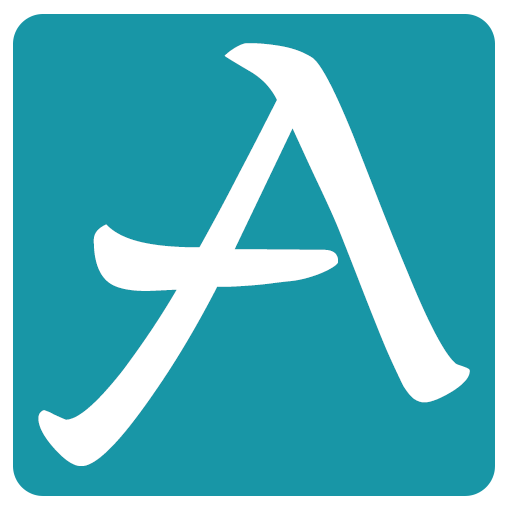
<style>
.page{position:relative;width:512px;height:512px;background:#1896a6}
.page>*{position:absolute;margin:0}
.t1{font:700px "PSL-Yaowaraj";color:#ffffff}
</style>
<div class="page">
<p class="t1" style="left:38px;top:43px;width:432px;height:423px">A</p>
</div>
